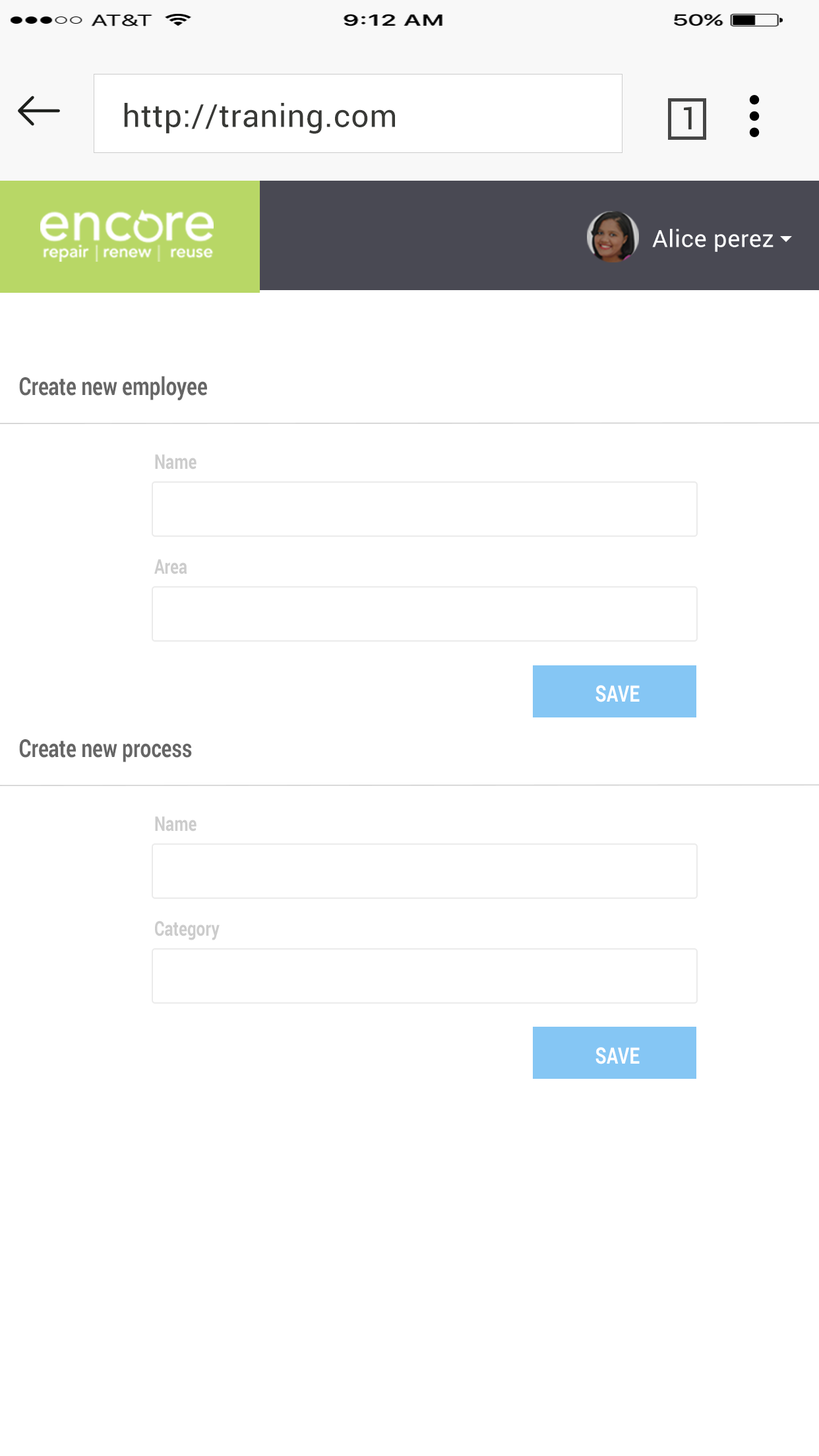
<style>
.page{position:relative;width:819px;height:1456px;background:#ffffff}
.page>*{position:absolute;margin:0}
.t1{font:31.7px "Roboto-Regular";letter-spacing:0.02em;color:#383936}
.t2{font:23.7px "Roboto-Regular";letter-spacing:0.02em;color:#fdfeff}
.t3{font:24.8px "Roboto-Bold";color:#666666;scale:0.79 1}
.t4{font:20.3px "Roboto-Bold";color:#cccccc;scale:0.79 1}
.t5{font:22.5px "Roboto-Bold";color:#ffffff;scale:0.79 1}
</style>
<div class="page">
<p class="t1" style="left:124px;top:103px;width:271px;height:31px">http://traning.com</p>
<p class="t1" style="left:684px;top:107px;width:8px;height:23px">1</p>
<p class="t2" style="left:652px;top:229px;width:121px;height:23px">Alice perez</p>
<p class="t3" style="left:19px;top:376px;width:188px;height:24px">Create new employee</p>
<p class="t4" style="left:155px;top:454px;width:42px;height:16px">Name</p>
<p class="t4" style="left:154px;top:559px;width:33px;height:15px">Area</p>
<p class="t5" style="left:595px;top:685px;width:45px;height:17px">SAVE</p>
<p class="t3" style="left:19px;top:739px;width:173px;height:23px">Create new process</p>
<p class="t4" style="left:155px;top:816px;width:42px;height:16px">Name</p>
<p class="t4" style="left:155px;top:921px;width:65px;height:19px">Category</p>
<p class="t5" style="left:595px;top:1047px;width:45px;height:17px">SAVE</p>
</div>
